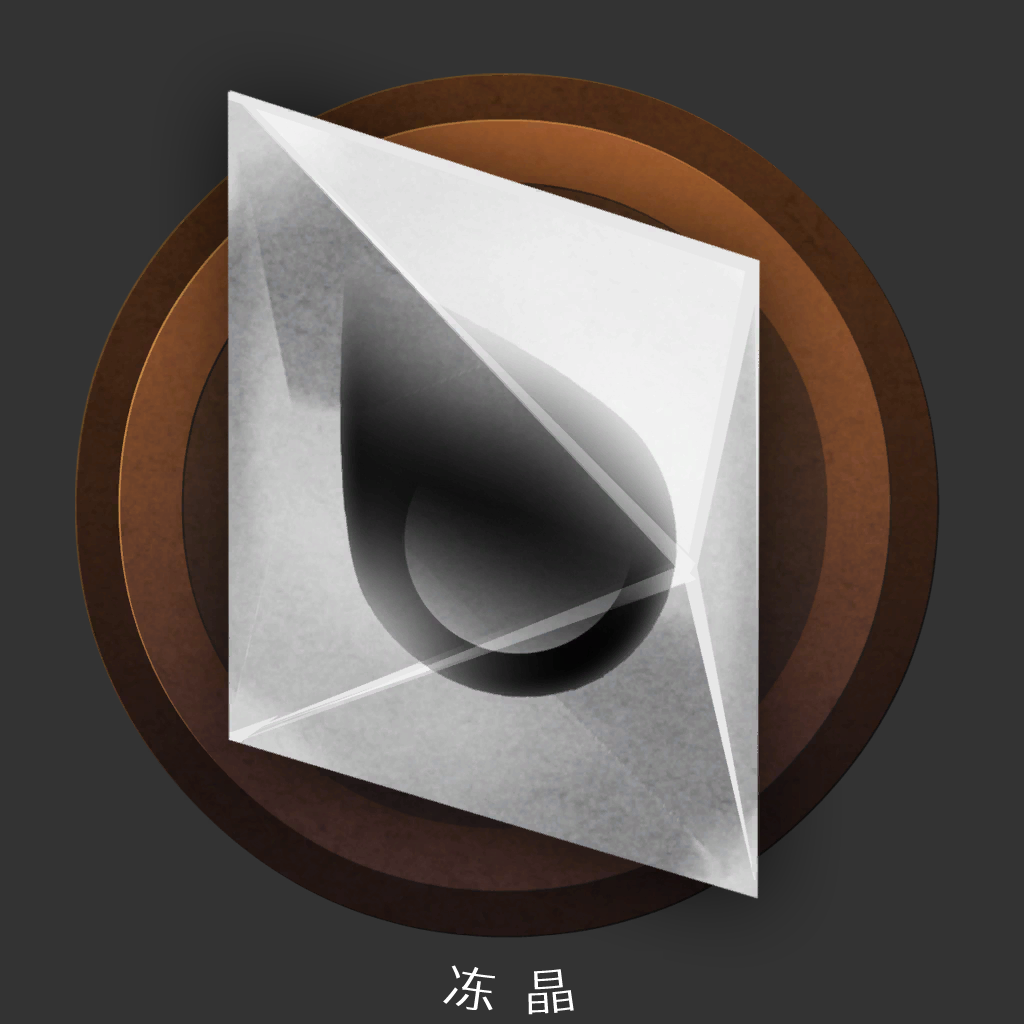
<style>
.page{position:relative;width:1024px;height:1024px;background:#333333}
.page>*{position:absolute;margin:0}
.t1{font:48px "SourceHanSansSC-Normal";letter-spacing:0.5em;color:#ffffff}
</style>
<div class="page">
<p class="t1" style="left:443px;top:965px;width:131px;height:50px">冻晶</p>
</div>
